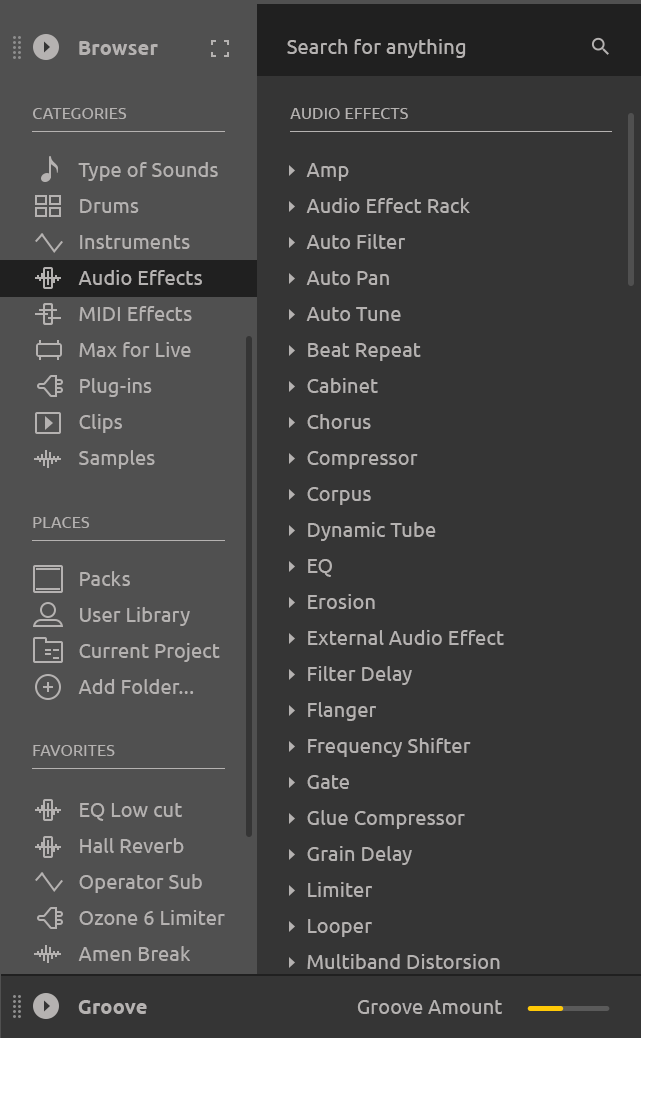
<style>
.page{position:relative;width:649px;height:1112px;background:#353535}
.page>*{position:absolute;margin:0}
.t1{font:20px "Ubuntu-Bold";letter-spacing:0.01em;color:#b5b2b1}
.t2{font:20px "Ubuntu";letter-spacing:0.01em;color:#b5b2b1}
.t3{font:16px "Ubuntu";letter-spacing:0.01em;color:#b5b2b1;text-transform:uppercase}
.t4{font:20px/36px "Ubuntu";letter-spacing:0.01em;color:#b5b2b1}
</style>
<div class="page">
<p class="t1" style="left:79px;top:41px;width:79px;height:14px">Browser</p>
<p class="t2" style="left:287px;top:39px;width:179px;height:19px">Search for anything</p>
<p class="t3" style="left:33px;top:108px;width:94px;height:11px">Categories</p>
<p class="t3" style="left:290px;top:108px;width:118px;height:11px">Audio Effects</p>
<p class="t4" style="left:78px;top:162px;width:140px;height:307px">Type of Sounds<br>Drums<br>Instruments<br>Audio Effects<br>MIDI Effects<br>Max for Live<br>Plug-ins<br>Clips<br>Samples</p>
<p class="t4" style="left:306px;top:163px;width:198px;height:846px">Amp<br>Audio Effect Rack<br>Auto Filter<br>Auto Pan<br>Auto Tune<br>Beat Repeat<br>Cabinet<br>Chorus<br>Compressor<br>Corpus<br>Dynamic Tube<br>EQ<br>Erosion<br>External Audio Effect<br>Filter Delay<br>Flanger<br>Frequency Shifter<br>Gate<br>Glue Compressor<br>Grain Delay<br>Limiter<br>Looper<br>Multiband Distorsion<br>Multiband Dynamics<br>Overdrive<br>Phaser<br>Ping Pong Delay<br>Redux<br>Resonators<br>Reverb<br>Saturator<br>Simple Delay<br>Spectrum<br>Stereo Imager<br>Transient Designer<br>Utility<br>Vinyl Distorsion<br>Vocoder</p>
<p class="t3" style="left:33px;top:517px;width:57px;height:11px">Places</p>
<p class="t4" style="left:78px;top:571px;width:142px;height:123px">Packs<br>User Library<br>Current Project<br>Add Folder...</p>
<p class="t3" style="left:33px;top:745px;width:82px;height:11px">Favorites</p>
<p class="t4" style="left:78px;top:803px;width:147px;height:194px">EQ Low cut<br>Hall Reverb<br>Operator Sub<br>Ozone 6 Limiter<br>Amen Break<br>Add Favorite...</p>
<p class="t1" style="left:78px;top:1000px;width:69px;height:14px">Groove</p>
<p class="t2" style="left:357px;top:1000px;width:145px;height:14px">Groove Amount</p>
</div>
